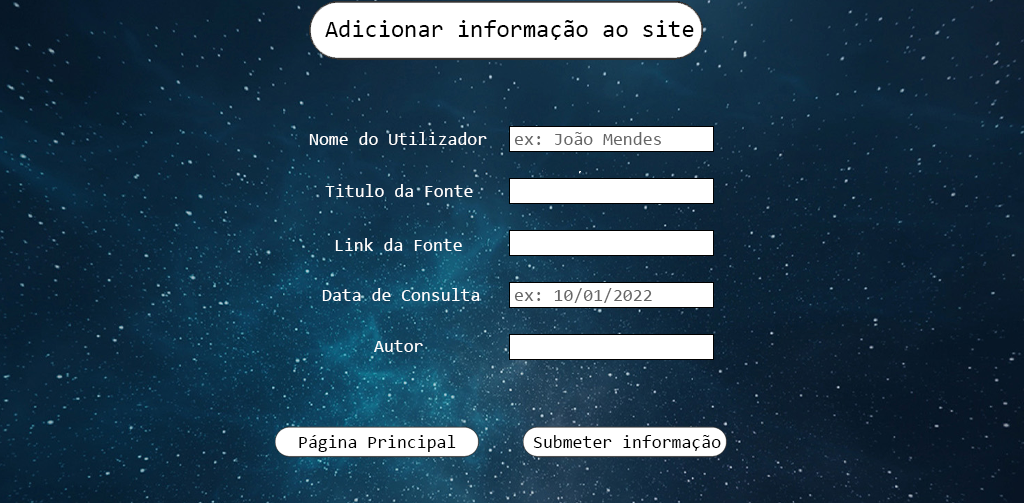
<style>
.page{position:relative;width:1024px;height:503px}
.page>*{position:absolute;margin:0}
.t1{font:24px "Consolas";color:#000000}
.t2{font:18px "Consolas";color:#ffffff}
.t3{font:18px "Consolas";color:#666666}
.t4{font:18px "Consolas";color:#000000}
</style>
<div class="page">
<p class="t1" style="left:325px;top:20px;width:369px;height:20px">Adicionar informação ao site</p>
<p class="t2" style="left:309px;top:132px;width:178px;height:13px">Nome do Utilizador</p>
<p class="t3" style="left:514px;top:132px;width:147px;height:13px">ex: João Mendes</p>
<p class="t2" style="left:325px;top:184px;width:148px;height:13px">Titulo da Fonte</p>
<p class="t2" style="left:335px;top:238px;width:127px;height:13px">Link da Fonte</p>
<p class="t2" style="left:322px;top:288px;width:158px;height:13px">Data de Consulta</p>
<p class="t3" style="left:514px;top:288px;width:138px;height:15px">ex: 10/01/2022</p>
<p class="t2" style="left:374px;top:340px;width:49px;height:12px">Autor</p>
<p class="t4" style="left:299px;top:435px;width:157px;height:17px">Página Principal</p>
<p class="t4" style="left:533px;top:435px;width:188px;height:16px">Submeter informação</p>
</div>
